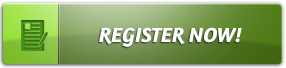
<style>
.page{position:relative;width:286px;height:68px}
.page>*{position:absolute;margin:0}
.t1{font:21px "Amaranth-BoldItalic";color:#ffffff}
</style>
<div class="page">
<p class="t1" style="left:99px;top:27px;width:143px;height:20px">REGISTER NOW!</p>
</div>
